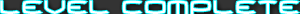
<style>
.page{position:relative;width:300px;height:14px}
.page>*{position:absolute;margin:0}
.t1{font:24px "ThundergodII";color:#ffffff}
</style>
<div class="page">
<p class="t1" style="left:0px;top:0px;width:300px;height:14px">LEVEL COMPLETE</p>
</div>
